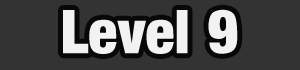
<style>
.page{position:relative;width:300px;height:70px;background:#333333}
.page>*{position:absolute;margin:0}
.t1{font:60px "Harvest";color:#f2f2f2}
</style>
<div class="page">
<p class="t1" style="left:63px;top:9px;width:175px;height:45px">Level 9</p>
</div>
